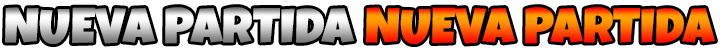
<style>
.page{position:relative;width:720px;height:50px;background:#ffffff}
.page>*{position:absolute;margin:0}
.t1{font:50px "LuckiestGuy-Regular"}
</style>
<div class="page">
<p class="t1" style="left:5px;top:7px;width:349px;height:37px">NUEVA PARTIDA</p>
<p class="t1" style="left:366px;top:7px;width:349px;height:37px">NUEVA PARTIDA</p>
</div>
